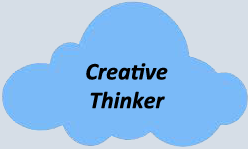
<style>
.page{position:relative;width:248px;height:149px;background:#7abaf8}
.page>*{position:absolute;margin:0}
.t1{font:24px "Calibri-BoldItalic";color:#000000}
</style>
<div class="page">
<p class="t1" style="left:86px;top:63px;width:82px;height:46px;text-align:center">Creative<br>Thinker</p>
</div>
